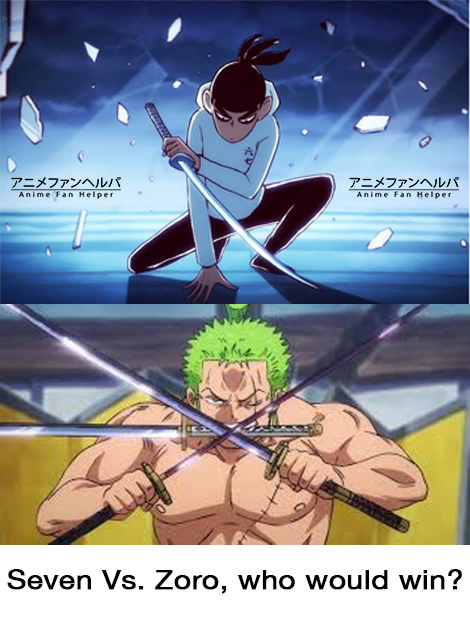
<style>
.page{position:relative;width:470px;height:628px}
.page>*{position:absolute;margin:0}
.t1{font:27px "HelveticaNeue";color:#000000;font-weight:bold;scale:1.1 1}
</style>
<div class="page">
<p class="t1" style="left:7px;top:569px;width:455px;height:25px">Seven Vs. Zoro, who would win?</p>
</div>
